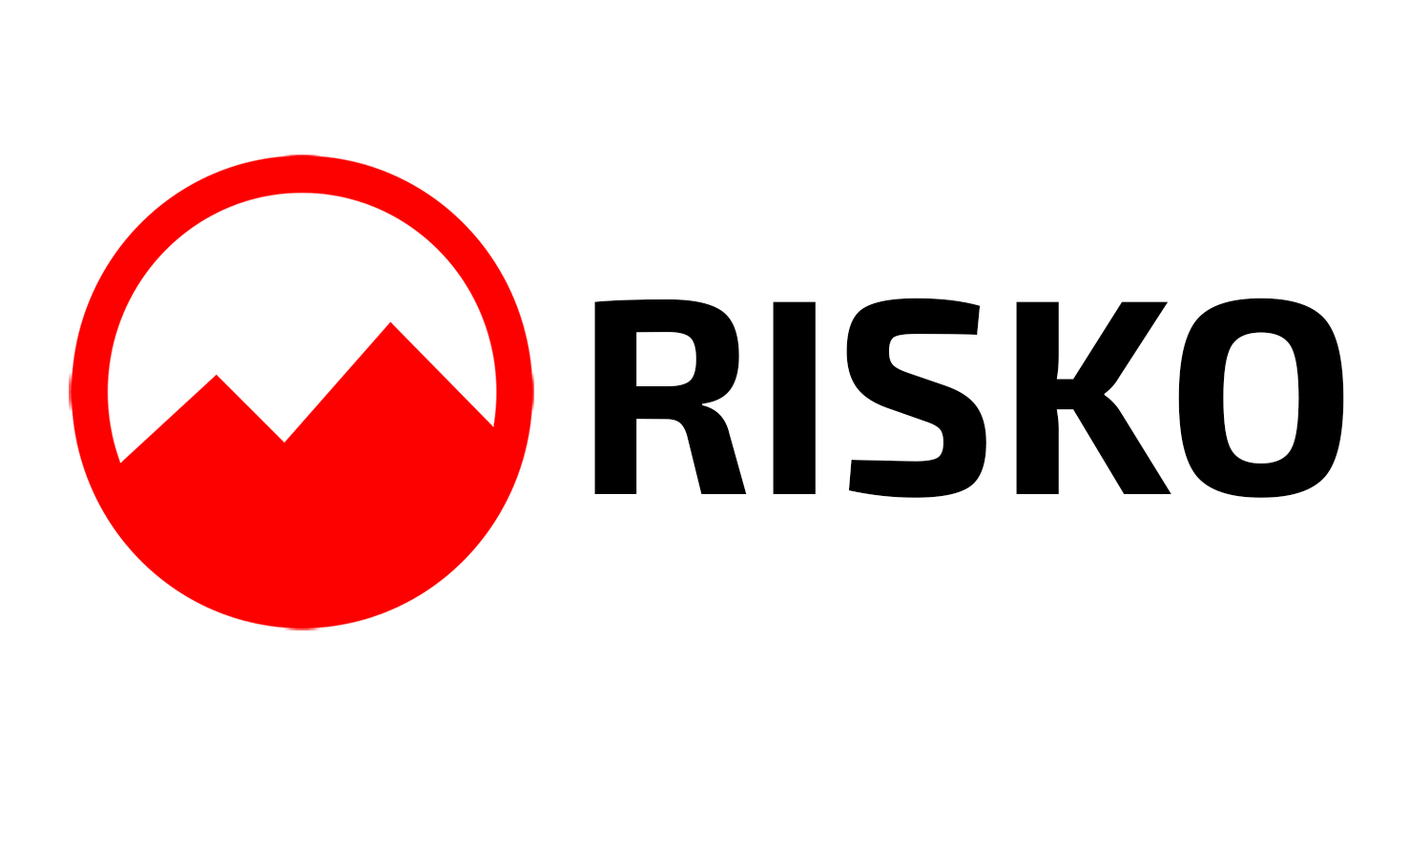
<style>
.page{position:relative;width:1409px;height:846px;background:#ffffff}
.page>*{position:absolute;margin:0}
.t1{font:278.6px "Exo2-Bold";color:#000000}
</style>
<div class="page">
<p class="t1" style="left:594px;top:298px;width:750px;height:200px">RISKO</p>
</div>
